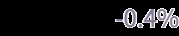
<style>
.page{position:relative;width:179px;height:36px;background:#000000}
.page>*{position:absolute;margin:0}
.t1{font:24px "WebPSD-18463539-0-Regular";color:#837a91;font-weight:bold}
</style>
<div class="page">
<p class="t1" style="left:0px;top:0px;width:179px;height:36px">-0.4%</p>
</div>
